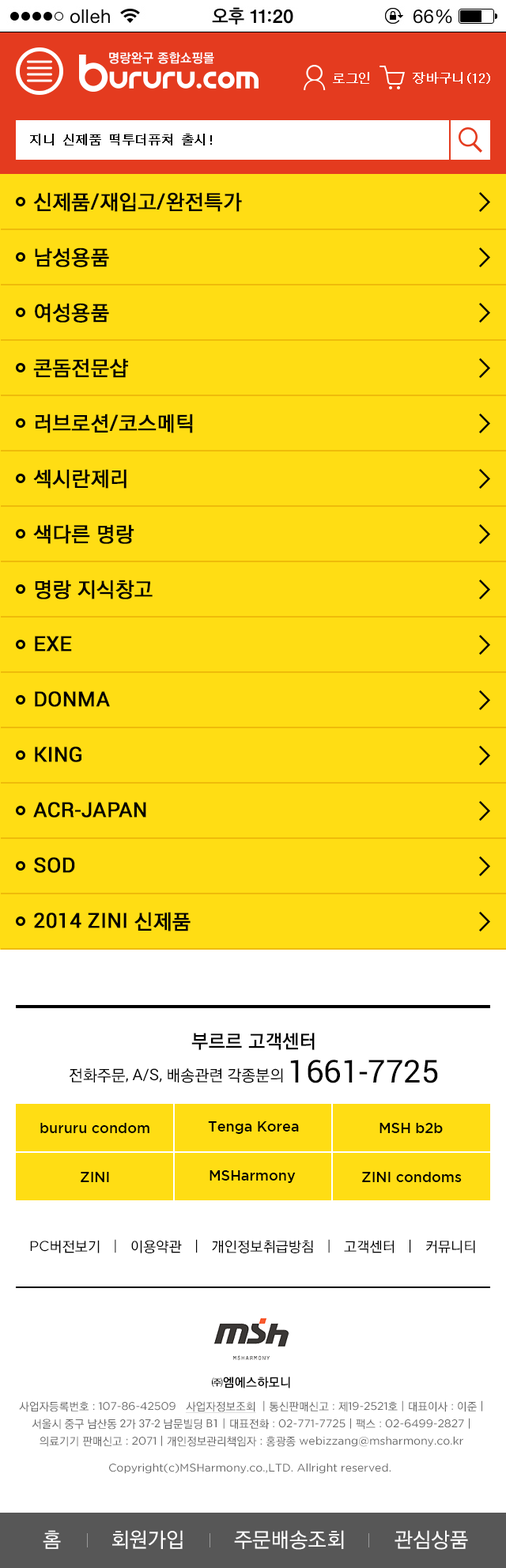
<style>
.page{position:relative;width:506px;height:1568px;background:#ffdd14}
.page>*{position:absolute;margin:0}
.t1{font:12.7px "YGO540";color:#ffffff}
.t2{font:12.7px "DotumChe";letter-spacing:-0.025em;color:#ffffff;font-weight:bold}
.t3{font:12.7px "DotumChe";letter-spacing:-0.025em;color:#000000;font-weight:bold}
.t4{font:20.6px/55.4px "Roboto-Regular";color:#010101;text-transform:uppercase;font-weight:bold}
.t5{font:20.6px/55.4px "YGO530";color:#010101;text-transform:uppercase;font-weight:bold}
.t6{font:15.8px/23.7px "YGO530";color:#010101;text-transform:uppercase}
.t7{font:19px/15.8px "YGO540";color:#010101;text-transform:uppercase}
.t8{font:15.8px/23.7px "Roboto-Regular";color:#010101;text-transform:uppercase}
.t9{font:31.6px/33.2px "Roboto-Regular";color:#010101;text-transform:uppercase}
.t10{font:14.2px "GothamMedium";color:#000000}
.t11{font:14.2px "YGO530";color:#010101;text-transform:uppercase}
.t12{font:14.2px "GothamBook";color:#010101;text-transform:uppercase}
.t13{font:11.1px/17.4px "GothamBook";color:#696969}
.t14{font:12.7px/14.2px "YGO540";color:#000000;text-transform:uppercase}
.t15{font:11.1px/23.7px "YGO530";color:#696969}
.t16{font:11.1px/23.7px "GothamBook";color:#696969}
.t17{font:11.1px/23.7px "YGO530";color:#696969;text-decoration:underline}
.t18{font:11.1px/17.4px "YGO530";color:#696969}
.t19{font:11.1px/17.4px "Roboto-Regular";color:#696969}
.t20{font:11.1px "GothamBook";color:#696969}
.t21{font:20.6px "YGO530";color:#ffffff}
</style>
<div class="page">
<p class="t1" style="left:109px;top:52px;width:105px;height:12px">명랑완구 종합쇼핑몰</p>
<p class="t2" style="left:333px;top:72px;width:157px;height:12px">로그인      장바구니(12)</p>
<p class="t3" style="left:30px;top:134px;width:182px;height:11px">지니 신제품 떡투더퓨쳐 출시!</p>
<p class="t4" style="left:33px;top:192px;width:209px;height:739px"><span class="t5">신제품</span>/<span class="t5">재입고</span>/<span class="t5">완전특가<br>남성용품<br>여성용품<br>콘돔전문샵<br>러브로션</span>/<span class="t5">코스메틱<br>섹시란제리<br>색다른 명랑<br>명랑 지식창고</span><br>EXE<br>donma<br>king<br>acr-japan<br>sod<br>2014 zini <span class="t5">신제품</span></p>
<p class="t6" style="left:69px;top:1033px;width:369px;height:50px;text-align:center"><span class="t7">부르르 고객센터<br></span>전화주문<span class="t8">, A/S, </span>배송관련 각종분의 <span class="t9">1661-7725</span></p>
<p class="t10" style="left:208px;top:1121px;width:91px;height:13px">Tenga Korea</p>
<p class="t10" style="left:40px;top:1123px;width:109px;height:10px">bururu condom</p>
<p class="t10" style="left:380px;top:1123px;width:63px;height:10px">MSH b2b</p>
<p class="t10" style="left:81px;top:1172px;width:28px;height:10px">ZINI</p>
<p class="t10" style="left:210px;top:1170px;width:86px;height:13px">MSHarmony</p>
<p class="t10" style="left:362px;top:1172px;width:100px;height:10px">ZINI condoms</p>
<p class="t11" style="left:30px;top:1239px;width:445px;height:14px"><span class="t12">PC</span>버전보기<span class="t12">   |   </span>이용약관<span class="t12">   |   </span>개인정보취급방침<span class="t12">   |   </span>고객센터<span class="t12">   |   </span>커뮤니티</p>
<p class="t13" style="left:19px;top:1377px;width:463px;height:70px;text-align:center"><span class="t14">㈜엠에스하모니<br></span><span class="t15">사업자등록번호</span><span class="t16"> : 107-86-42509   </span><span class="t17">사업자정보조회</span><span class="t16">  | </span><span class="t15">통신판매신고</span><span class="t16"> : </span><span class="t15">제</span><span class="t16">19-2521</span><span class="t15">호</span><span class="t16"> | </span><span class="t15">대표이사</span><span class="t16"> : </span><span class="t15">이준</span><span class="t16"> |<br></span><span class="t18">서울시 중구 남산동</span><span class="t19"> 2</span><span class="t18">가</span><span class="t19"> 37-2 </span><span class="t18">남문빌딩</span><span class="t19"> B1</span> | <span class="t18">대표전화</span> : 02-771-7725 | <span class="t18">팩스</span> : 02-6499-2827 |<br><span class="t18">의료기기 판매신고</span> : 2071 | <span class="t18">개인정보관리책임자</span> : <span class="t18">홍광종</span> webizzang@msharmony.co.kr</p>
<p class="t20" style="left:109px;top:1463px;width:282px;height:11px">Copyright(c)MSHarmony.co.,LTD. Allright reserved.</p>
<p class="t21" style="left:43px;top:1530px;width:425px;height:20px">홈        회원가입        주문배송조회        관심상품</p>
</div>
